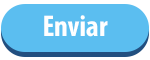
<style>
.page{position:relative;width:150px;height:60px;background:#5bbef0}
.page>*{position:absolute;margin:0}
.t1{font:30px "MyriadPro-BoldCond";color:#ffffff}
</style>
<div class="page">
<p class="t1" style="left:44px;top:15px;width:64px;height:22px">Enviar</p>
</div>
